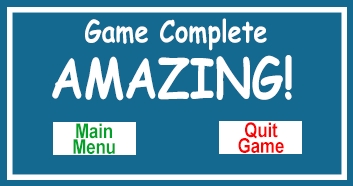
<style>
.page{position:relative;width:353px;height:186px;background:#146991}
.page>*{position:absolute;margin:0}
.t1{font:30px "ComicSansMS-Bold";color:#ffffff;scale:0.83 1}
.t2{font:55px "ComicSansMS-Bold";color:#ffffff;scale:0.83 1}
.t3{font:20px "Arial-BoldMT";color:#00a22a;scale:0.83 1}
.t4{font:20px "Arial-BoldMT";color:#ff0000;scale:0.83 1}
</style>
<div class="page">
<p class="t1" style="left:85px;top:18px;width:182px;height:33px">Game Complete</p>
<p class="t2" style="left:52px;top:55px;width:240px;height:46px">AMAZING!</p>
<p class="t3" style="left:73px;top:123px;width:42px;height:31px;text-align:center">Main<br>Menu</p>
<p class="t4" style="left:238px;top:122px;width:46px;height:31px;text-align:center">Quit<br>Game</p>
</div>
